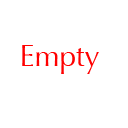
<style>
.page{position:relative;width:128px;height:128px;background:#ffffff}
.page>*{position:absolute;margin:0}
.t1{font:30px "Optima-Regular";color:#ff0000}
</style>
<div class="page">
<p class="t1" style="left:22px;top:45px;width:77px;height:29px">Empty</p>
</div>
